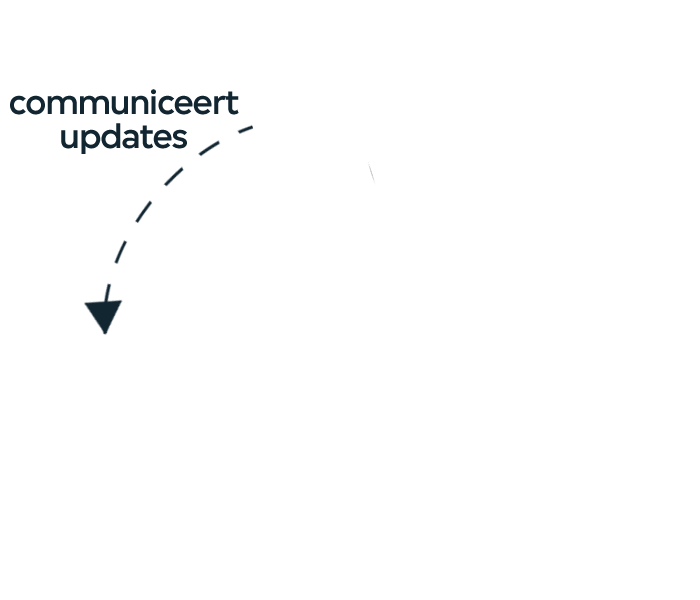
<style>
.page{position:relative;width:700px;height:600px;background:#ffffff}
.page>*{position:absolute;margin:0}
.t1{font:36px/34px "VPROThonikBold-Medium";letter-spacing:-0.025em;color:#122632}
</style>
<div class="page">
<p class="t1" style="left:10px;top:89px;width:229px;height:65px;text-align:center">communiceert<br>updates</p>
</div>
